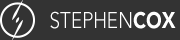
<style>
.page{position:relative;width:180px;height:40px;background:#333333}
.page>*{position:absolute;margin:0}
.t1{font:22.5px "Avenir-Light";color:#ffffff;scale:0.84 1}
.t2{font:22.5px "Avenir-Black";color:#ffffff;scale:0.84 1}
</style>
<div class="page">
<p class="t1" style="left:50px;top:11px;width:126px;height:18px">STEPHEN<span class="t2">COX</span></p>
</div>
